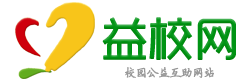
<style>
.page{position:relative;width:251px;height:82px;background:#ffffff}
.page>*{position:absolute;margin:0}
.t1{font:45px "RTWSYueGoTrial-Regular";color:#009414;font-weight:bold}
.t2{font:12px "FZYBKSJW--GB1-0";letter-spacing:-0.08em;color:#999999;font-weight:bold}
</style>
<div class="page">
<p class="t1" style="left:102px;top:17px;width:134px;height:44px">益校网</p>
<p class="t2" style="left:125px;top:67px;width:89px;height:11px">校园公益互助网站</p>
</div>
